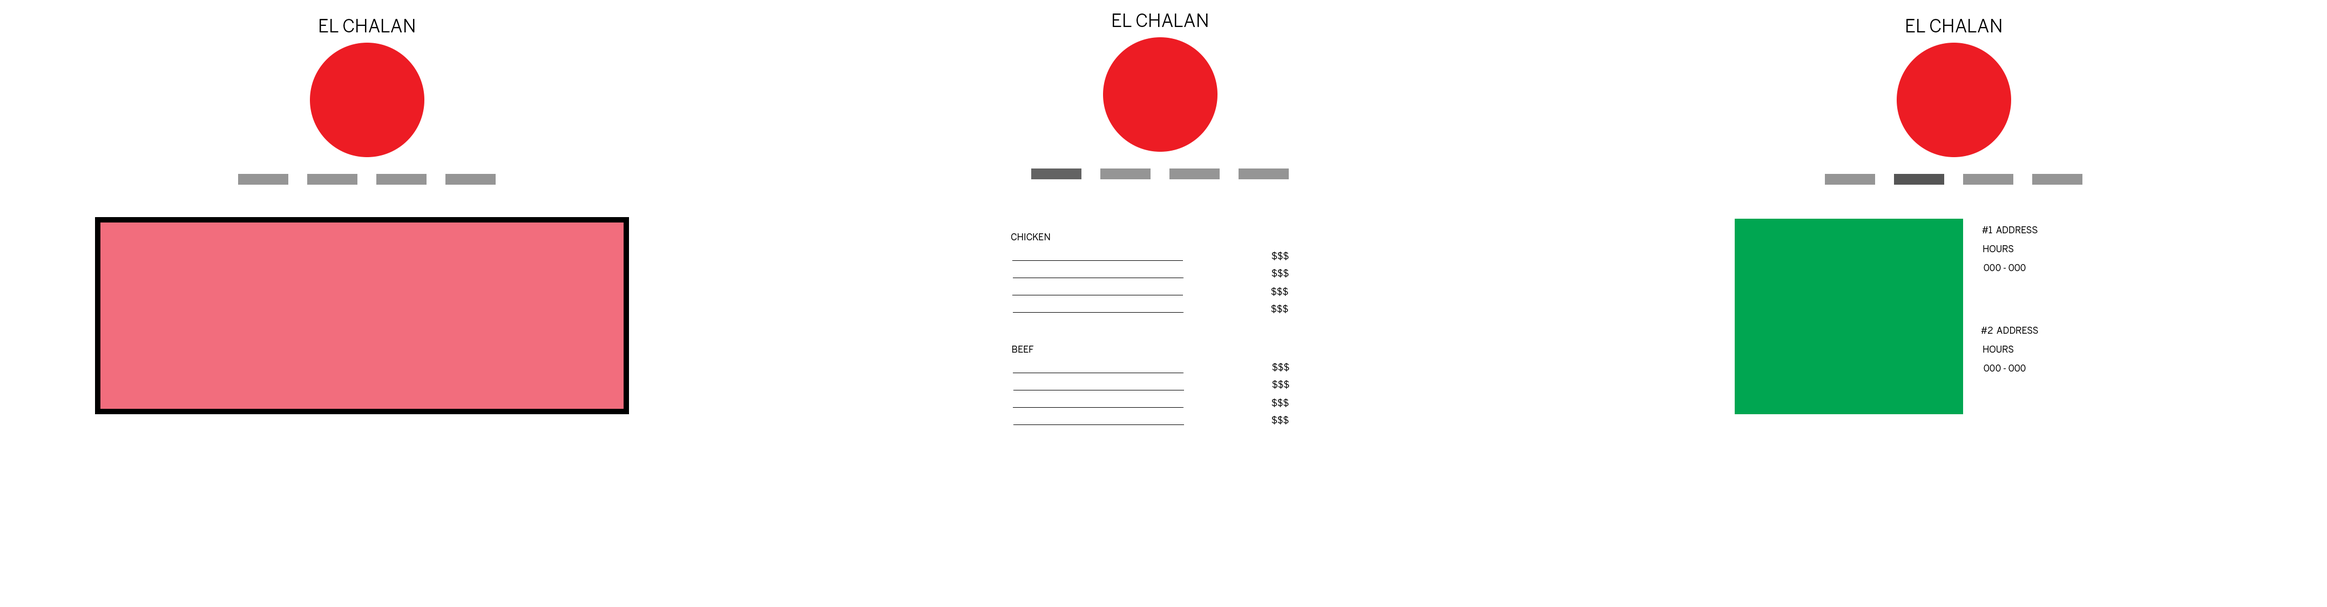
<style>
.page{position:relative;width:2327px;height:607px;background:#ffffff}
.page>*{position:absolute;margin:0}
.t1{font:18px "BentonSans-Book";color:#000000}
.t2{font:9px "BentonSans-Book";color:#000000}
</style>
<div class="page">
<p class="t1" style="left:1113px;top:13px;width:95px;height:14px">EL CHALAN</p>
<p class="t1" style="left:320px;top:19px;width:95px;height:13px">EL CHALAN</p>
<p class="t1" style="left:1907px;top:19px;width:95px;height:13px">EL CHALAN</p>
<p class="t2" style="left:1011px;top:233px;width:39px;height:7px">CHICKEN</p>
<p class="t2" style="left:1982px;top:226px;width:56px;height:7px">#1  ADDRESS</p>
<p class="t2" style="left:1983px;top:245px;width:31px;height:7px">HOURS</p>
<p class="t2" style="left:1272px;top:252px;width:17px;height:8px">$$$</p>
<p class="t2" style="left:1272px;top:269px;width:17px;height:9px">$$$</p>
<p class="t2" style="left:1984px;top:264px;width:42px;height:7px">000 - 000</p>
<p class="t2" style="left:1271px;top:287px;width:17px;height:9px">$$$</p>
<p class="t2" style="left:1271px;top:305px;width:17px;height:8px">$$$</p>
<p class="t2" style="left:1981px;top:327px;width:57px;height:7px">#2  ADDRESS</p>
<p class="t2" style="left:1012px;top:346px;width:22px;height:7px">BEEF</p>
<p class="t2" style="left:1983px;top:346px;width:31px;height:7px">HOURS</p>
<p class="t2" style="left:1272px;top:363px;width:18px;height:9px">$$$</p>
<p class="t2" style="left:1984px;top:364px;width:42px;height:8px">000 - 000</p>
<p class="t2" style="left:1272px;top:380px;width:18px;height:9px">$$$</p>
<p class="t2" style="left:1272px;top:399px;width:17px;height:8px">$$$</p>
<p class="t2" style="left:1272px;top:416px;width:17px;height:8px">$$$</p>
</div>
